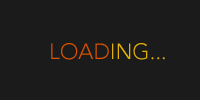
<style>
.page{position:relative;width:200px;height:100px;background:#1b1b1b}
.page>*{position:absolute;margin:0}
.t1{font:22px "Avenir-Light";color:#e1b208;text-transform:uppercase}
.t2{font:22px "Avenir-Light";color:#dc5300;text-transform:uppercase}
</style>
<div class="page">
<p class="t1" style="left:51px;top:43px;width:114px;height:17px"><span class="t2">load</span>ing...</p>
</div>
